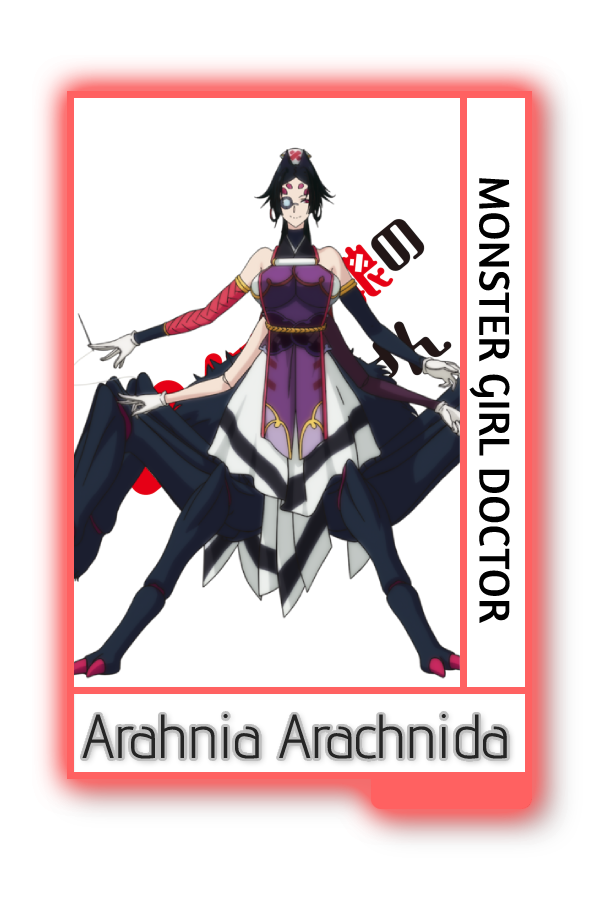
<style>
.page{position:relative;width:600px;height:900px;background:#ffffff}
.page>*{position:absolute;margin:0}
.t1{font:44px "Amaranth-Regular";color:#000000}
.t2{font:62px "AdventPro-Regular";color:#252525}
</style>
<div class="page">
<p class="t1" style="left:469px;top:178px;width:41px;height:446px;rotate:90deg">MONSTER GIRL DOCTOR</p>
<p class="t2" style="left:82px;top:713px;width:425px;height:46px">Arahnia Arachnida</p>
</div>
